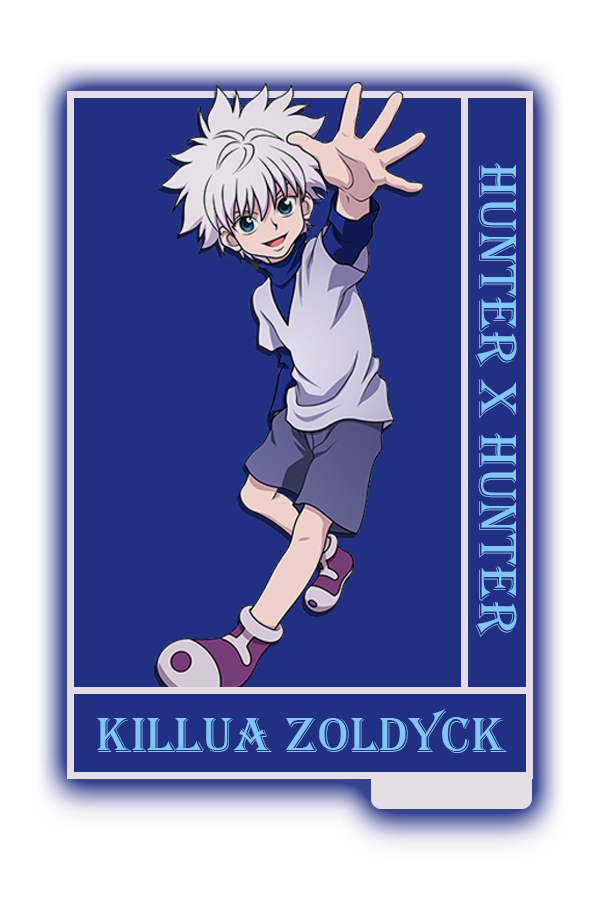
<style>
.page{position:relative;width:600px;height:900px;background:#223083}
.page>*{position:absolute;margin:0}
.t1{font:55.3px "Algerian";color:#96cbff}
.t2{font:51.2px "Algerian";color:#96cbff}
</style>
<div class="page">
<p class="t1" style="left:475px;top:163px;width:42px;height:475px;rotate:90deg">Hunter x Hunter</p>
<p class="t2" style="left:97px;top:709px;width:410px;height:44px">Killua Zoldyck</p>
</div>
